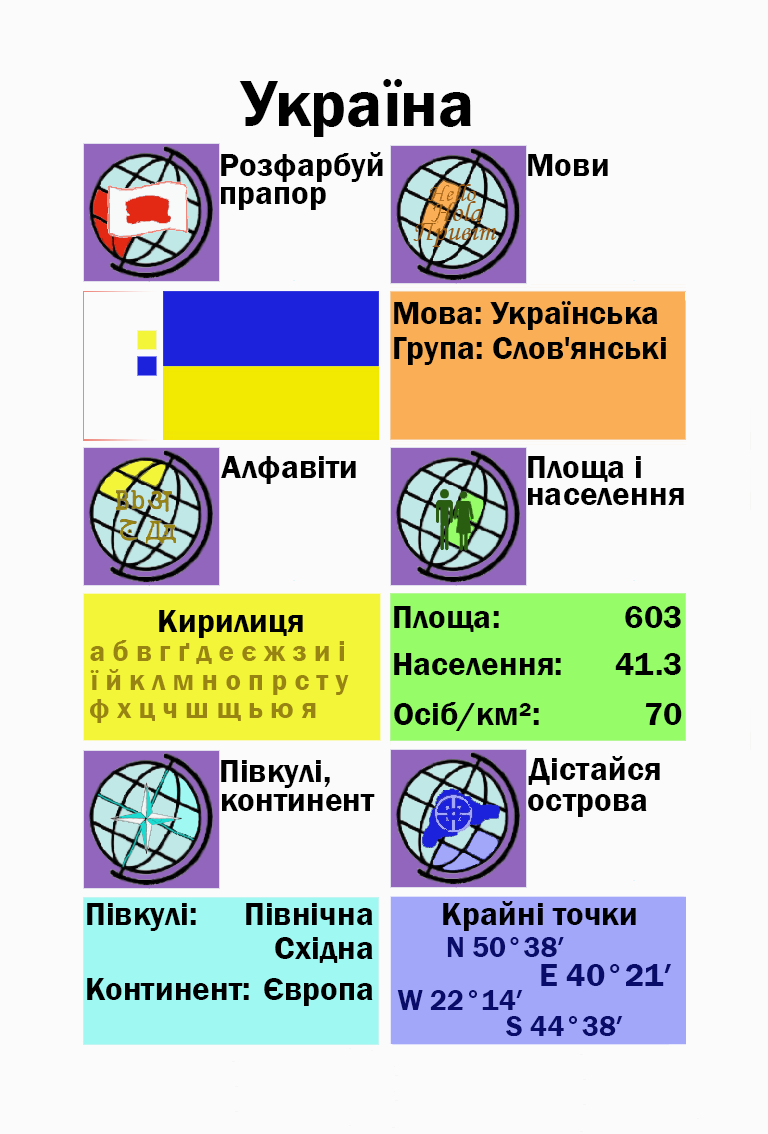
<style>
.page{position:relative;width:768px;height:1134px;background:#fbfbfb}
.page>*{position:absolute;margin:0}
.t1{font:66.7px "FranklinGothic-Demi";color:#000000}
.t2{font:33.3px "FranklinGothic-Demi";color:#000000}
.t3{font:33.3px "FranklinGothic-Demi";color:#000003}
.t4{font:29.2px "FranklinGothic-Demi";color:#988413}
.t5{font:29.2px "FranklinGothic-Demi";color:#090c69}
.t6{font:33.3px "FranklinGothic-Demi";color:#090c69}
</style>
<div class="page">
<p class="t1" style="left:239px;top:79px;width:232px;height:58px">Україна</p>
<p class="t2" style="left:221px;top:152px;width:162px;height:30px">Розфарбуй</p>
<p class="t2" style="left:528px;top:154px;width:80px;height:22px">Мови</p>
<p class="t2" style="left:221px;top:187px;width:105px;height:23px">прапор</p>
<p class="t2" style="left:394px;top:301px;width:264px;height:29px">Мова: Українська</p>
<p class="t2" style="left:394px;top:337px;width:272px;height:28px">Група: Слов'янські</p>
<p class="t2" style="left:221px;top:456px;width:135px;height:28px">Алфавіти</p>
<p class="t2" style="left:528px;top:456px;width:113px;height:26px">Площа і</p>
<p class="t2" style="left:528px;top:488px;width:156px;height:17px">населення</p>
<p class="t2" style="left:394px;top:606px;width:105px;height:26px">Площа:</p>
<p class="t3" style="left:625px;top:606px;width:56px;height:22px">603</p>
<p class="t2" style="left:159px;top:610px;width:144px;height:28px">Кирилиця</p>
<p class="t4" style="left:90px;top:640px;width:254px;height:24px">а б в г ґ д е є ж з и і</p>
<p class="t2" style="left:394px;top:653px;width:167px;height:22px">Населення:</p>
<p class="t2" style="left:615px;top:653px;width:66px;height:22px">41.3</p>
<p class="t4" style="left:90px;top:669px;width:259px;height:26px">ї й к л м н о п р с т у</p>
<p class="t4" style="left:90px;top:699px;width:226px;height:24px">ф х ц ч ш щ ь ю я</p>
<p class="t2" style="left:394px;top:702px;width:145px;height:29px">Осіб/км²:</p>
<p class="t2" style="left:645px;top:703px;width:37px;height:22px">70</p>
<p class="t2" style="left:221px;top:760px;width:109px;height:28px">Півкулі,</p>
<p class="t2" style="left:528px;top:756px;width:132px;height:29px">Дістайся</p>
<p class="t2" style="left:222px;top:794px;width:153px;height:17px">континент</p>
<p class="t2" style="left:528px;top:794px;width:119px;height:23px">острова</p>
<p class="t2" style="left:87px;top:903px;width:109px;height:28px">Півкулі:</p>
<p class="t2" style="left:246px;top:903px;width:127px;height:22px">Північна</p>
<p class="t3" style="left:443px;top:901px;width:193px;height:30px">Крайні точки</p>
<p class="t2" style="left:275px;top:937px;width:98px;height:26px">Східна</p>
<p class="t5" style="left:447px;top:937px;width:117px;height:20px">N 50°38′</p>
<p class="t6" style="left:541px;top:964px;width:130px;height:22px">E 40°21′</p>
<p class="t2" style="left:87px;top:978px;width:162px;height:22px">Континент:</p>
<p class="t2" style="left:264px;top:978px;width:109px;height:28px">Європа</p>
<p class="t5" style="left:397px;top:990px;width:126px;height:20px">W 22°14′</p>
<p class="t5" style="left:506px;top:1016px;width:117px;height:21px">S 44°38′</p>
</div>
